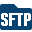
<style>
.page{position:relative;width:32px;height:32px;background:#08426e}
.page>*{position:absolute;margin:0}
.t1{font:17px "Impact";color:#ffffff}
</style>
<div class="page">
<p class="t1" style="left:1px;top:13px;width:30px;height:13px">SFTP</p>
</div>
